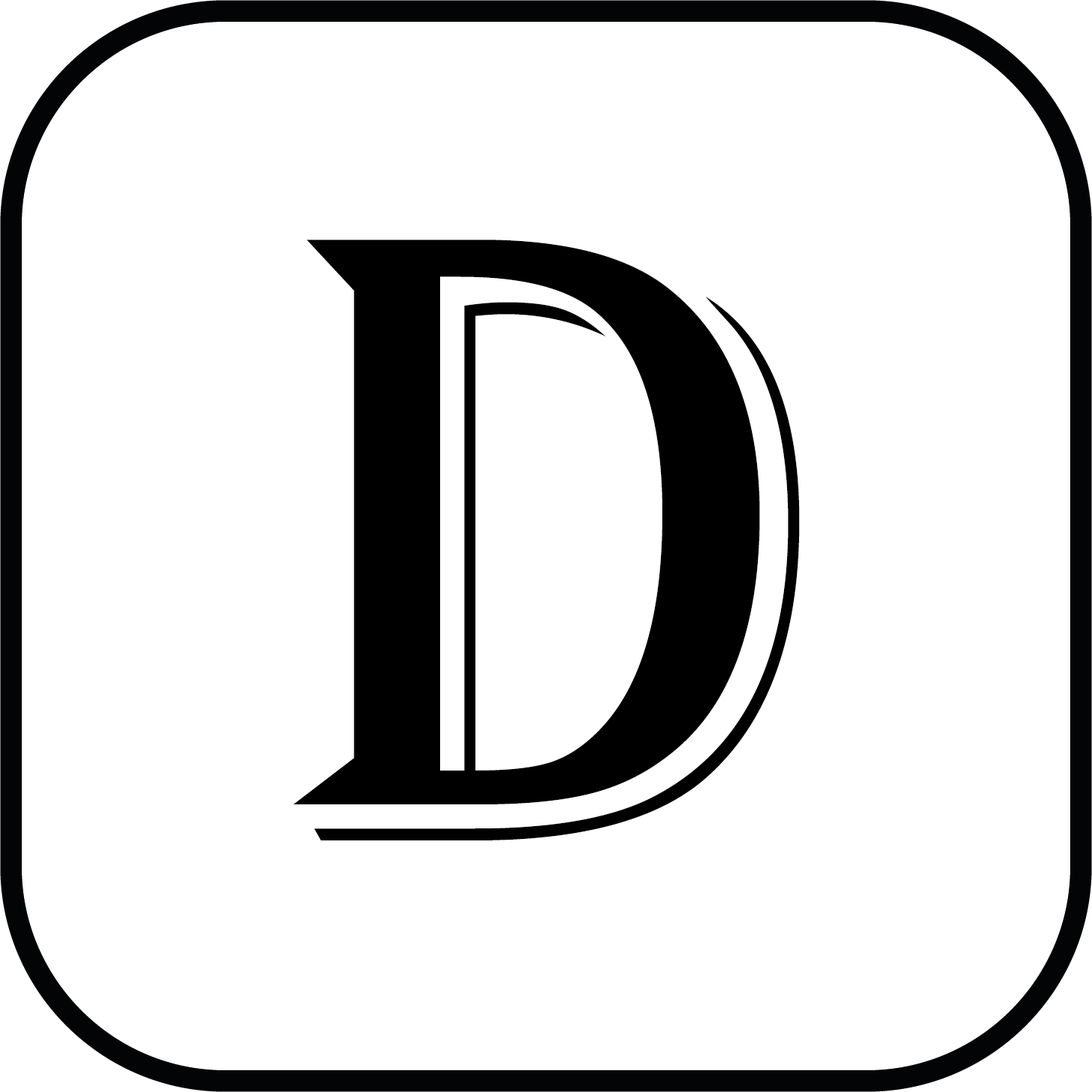
<style>
.page{position:relative;width:1092px;height:1092px;background:#ffffff}
.page>*{position:absolute;margin:0}
.t1{font:901.2px "Algerian";color:#000000;text-transform:uppercase}
</style>
<div class="page">
<p class="t1" style="left:293px;top:240px;width:507px;height:600px">D</p>
</div>
